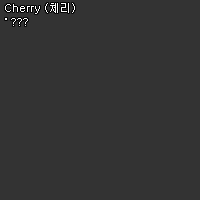
<style>
.page{position:relative;width:200px;height:200px;background:#333333}
.page>*{position:absolute;margin:0}
.t1{font:11px/14px "Dotum";color:#ffffff}
</style>
<div class="page">
<p class="t1" style="left:5px;top:3px;width:70px;height:23px">Cherry (체리)<br>˚ ???</p>
</div>
